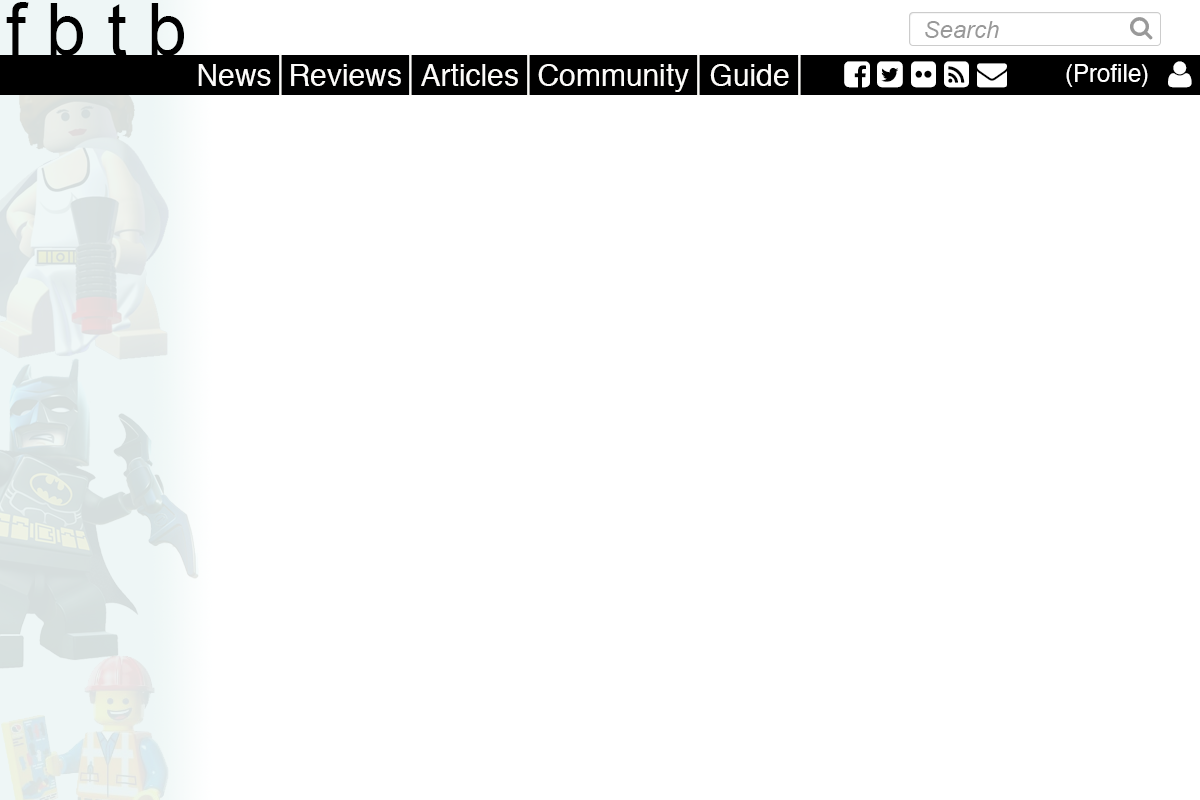
<style>
.page{position:relative;width:1200px;height:800px;background:#ffffff}
.page>*{position:absolute;margin:0}
.t1{font:72px "ArialMT";color:#000000}
.t2{font:24px "Arial-ItalicMT";color:#999999}
.t3{font:30px "Helvetica";color:#fcfbf9}
.t4{font:24px "Helvetica";color:#ffffff}
</style>
<div class="page">
<p class="t1" style="left:6px;top:2px;width:178px;height:54px">f b t b</p>
<p class="t2" style="left:925px;top:21px;width:74px;height:17px">Search</p>
<p class="t3" style="left:198px;top:64px;width:73px;height:22px">News</p>
<p class="t3" style="left:291px;top:64px;width:110px;height:22px">Reviews</p>
<p class="t3" style="left:421px;top:64px;width:97px;height:22px">Articles</p>
<p class="t3" style="left:538px;top:64px;width:151px;height:28px">Community</p>
<p class="t3" style="left:710px;top:64px;width:79px;height:22px">Guide</p>
<p class="t4" style="left:1066px;top:64px;width:82px;height:23px">(Profile)</p>
</div>
